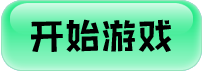
<style>
.page{position:relative;width:203px;height:71px}
.page>*{position:absolute;margin:0}
.t1{font:36px "BenmoJianzi";color:#000000}
</style>
<div class="page">
<p class="t1" style="left:31px;top:19px;width:141px;height:33px">开始游戏</p>
</div>
